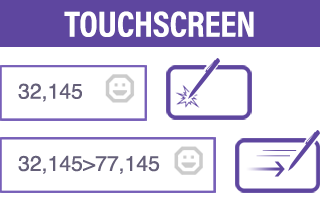
<style>
.page{position:relative;width:320px;height:210px;background:#ffffff}
.page>*{position:absolute;margin:0}
.t1{font:36.3px "AcuminProCond-Bold";color:#ffffff;text-transform:uppercase}
.t2{font:21.1px "Helvetica";color:#645f78}
</style>
<div class="page">
<p class="t1" style="left:64px;top:11px;width:190px;height:26px">Touchscreen</p>
<p class="t2" style="left:18px;top:83px;width:64px;height:19px">32,145</p>
<p class="t2" style="left:18px;top:155px;width:142px;height:19px">32,145&gt;77,145</p>
</div>
